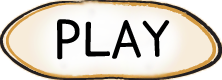
<style>
.page{position:relative;width:222px;height:80px}
.page>*{position:absolute;margin:0}
.t1{font:60px "HoonSomsR";color:#000000}
</style>
<div class="page">
<p class="t1" style="left:57px;top:19px;width:113px;height:41px">PLAY</p>
</div>
